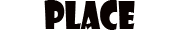
<style>
.page{position:relative;width:189px;height:30px;background:#ffffff}
.page>*{position:absolute;margin:0}
.t1{font:36.8px "ShowcardGothic-Reg";color:#090201;scale:0.83 1}
</style>
<div class="page">
<p class="t1" style="left:44px;top:0px;width:91px;height:30px">place</p>
</div>
